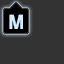
<style>
.page{position:relative;width:64px;height:64px;background:#333333}
.page>*{position:absolute;margin:0}
.t1{font:21px "CoolveticaRg-Regular";letter-spacing:-0.05em;color:#d4ecff}
</style>
<div class="page">
<p class="t1" style="left:9px;top:14px;width:14px;height:15px">M</p>
</div>
